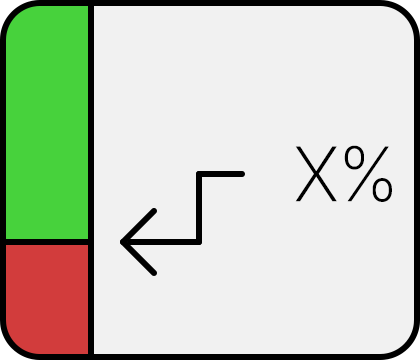
<style>
.page{position:relative;width:420px;height:360px;background:#f1f1f1}
.page>*{position:absolute;margin:0}
.t1{font:75px "Inter-ExtraLight";color:#000000}
</style>
<div class="page">
<p class="t1" style="left:295px;top:145px;width:97px;height:57px">X%</p>
</div>
